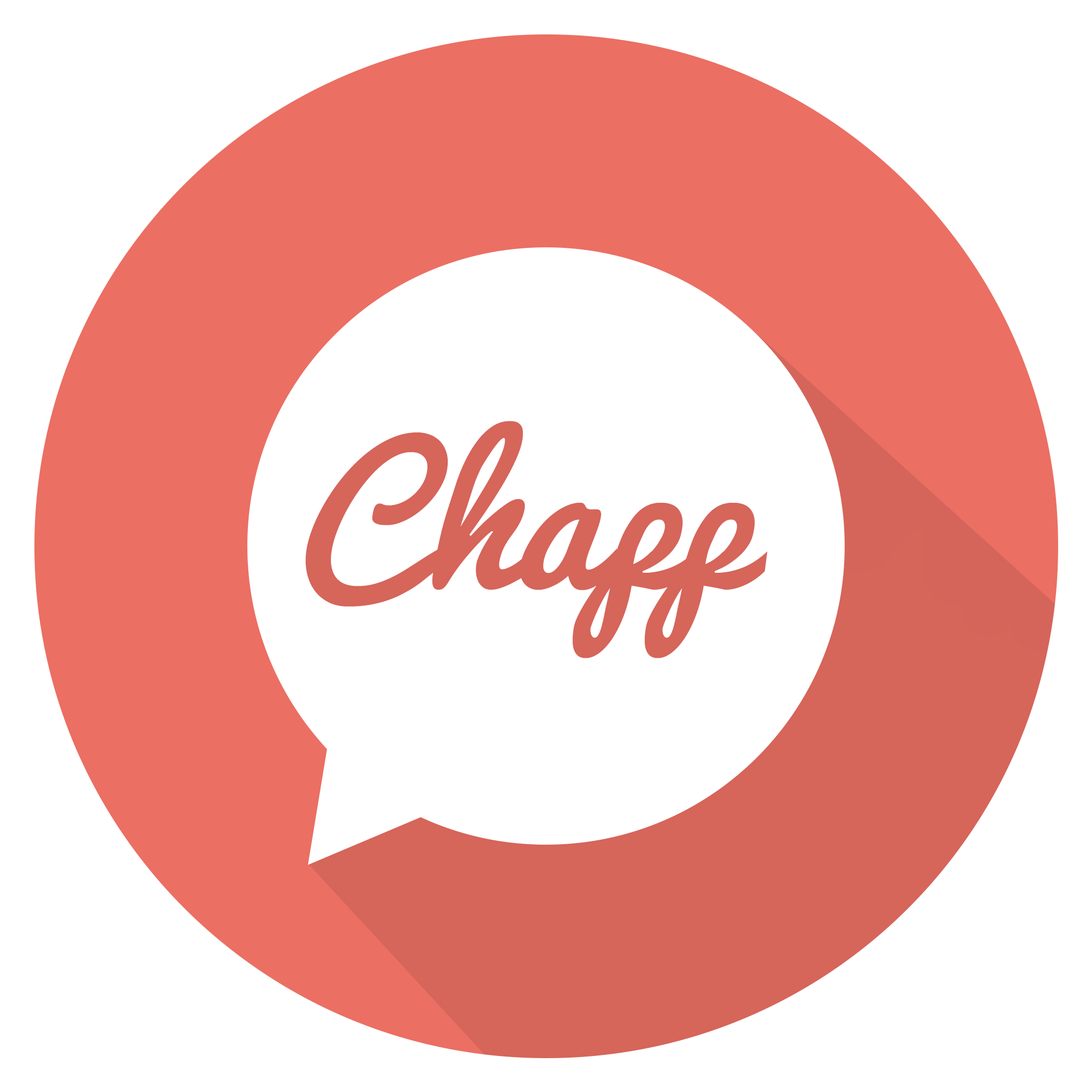
<style>
.page{position:relative;width:1092px;height:1092px;background:#ffffff}
.page>*{position:absolute;margin:0}
.t1{font:179.7px "Pacifico";letter-spacing:-0.02em;color:#d6655a;font-style:italic}
</style>
<div class="page">
<p class="t1" style="left:305px;top:421px;width:463px;height:237px">Chapp</p>
</div>
